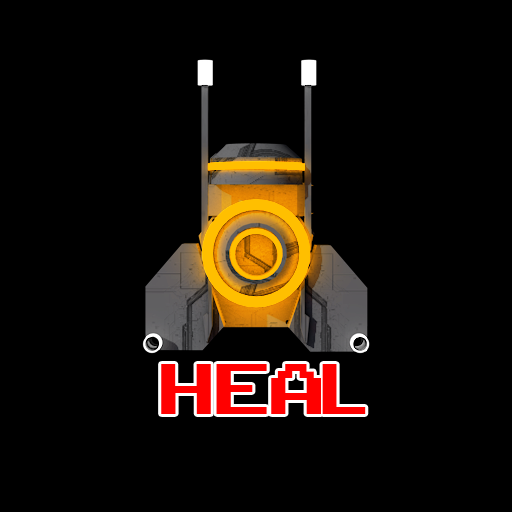
<style>
.page{position:relative;width:512px;height:512px;background:#000000}
.page>*{position:absolute;margin:0}
.t1{font:100px "ArcadeClassic";color:#ff0000}
</style>
<div class="page">
<p class="t1" style="left:161px;top:364px;width:205px;height:50px">Heal</p>
</div>
